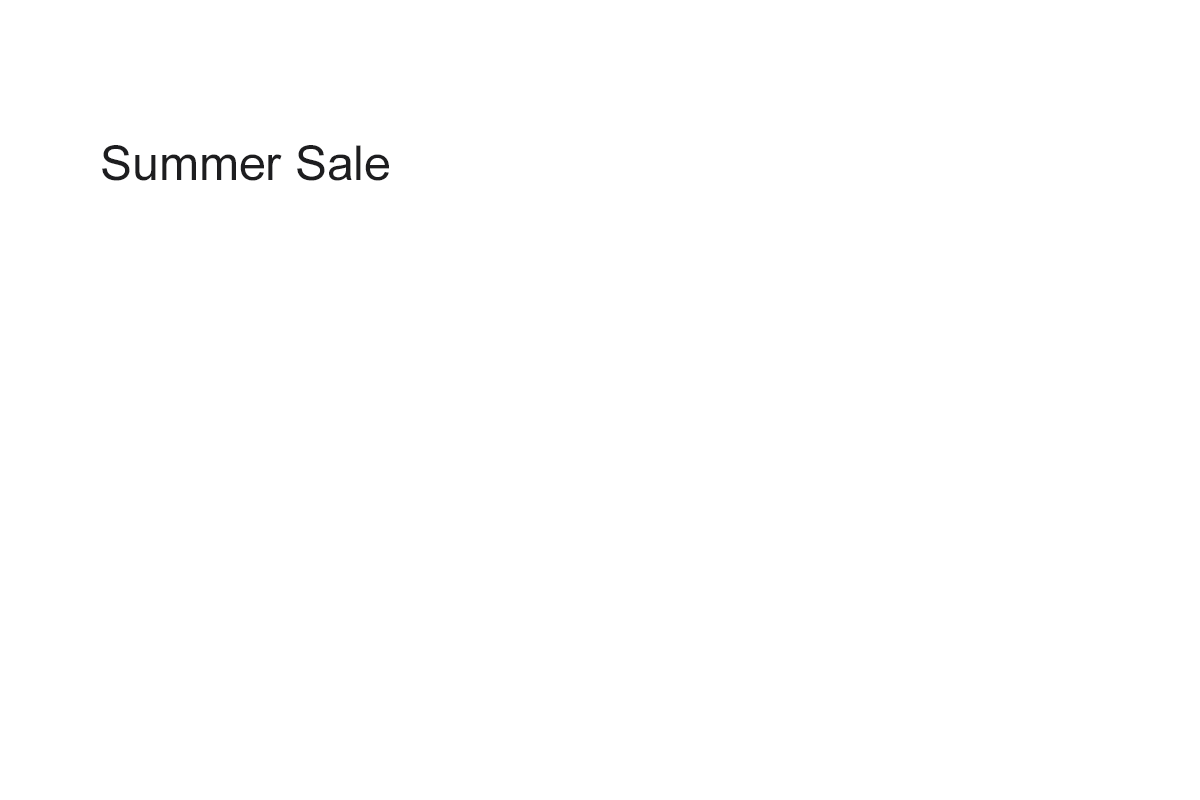
<style>
.page{position:relative;width:1200px;height:800px;background:#ffffff}
.page>*{position:absolute;margin:0}
.t1{font:48px "ArialMT";color:#1d1d1f}
</style>
<div class="page">
<p class="t1" style="left:102px;top:145px;width:287px;height:36px">Summer Sale</p>
</div>
